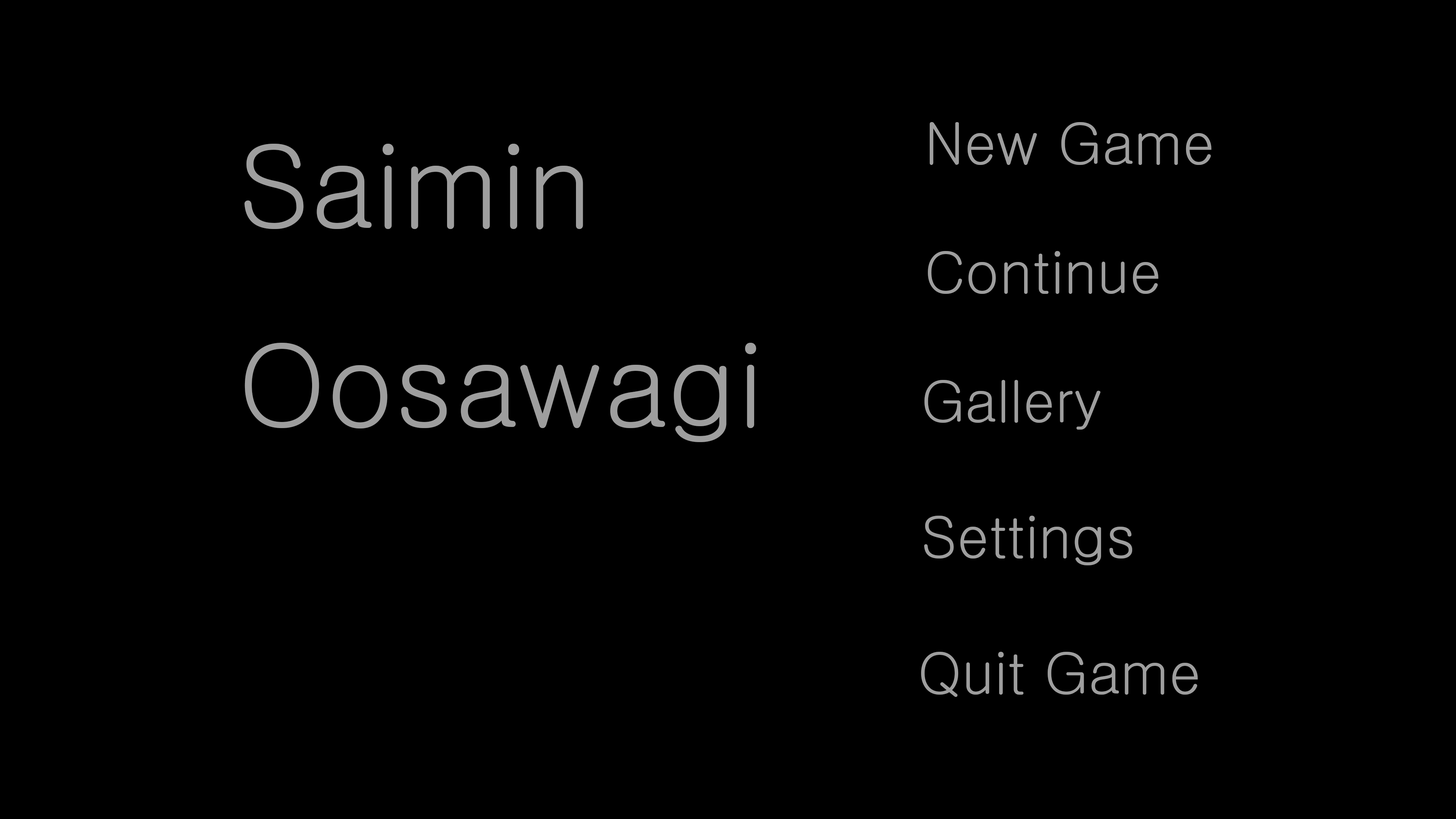
<style>
.page{position:relative;width:1456px;height:819px;background:#000000}
.page>*{position:absolute;margin:0}
.t1{font:56.9px "Gulim";color:#9e9e9e}
.t2{font:113.7px "Gulim";color:#9e9e9e}
</style>
<div class="page">
<p class="t1" style="left:930px;top:122px;width:281px;height:43px">New Game</p>
<p class="t2" style="left:244px;top:144px;width:512px;height:298px">Saimin<br>Oosawagi</p>
<p class="t1" style="left:928px;top:251px;width:230px;height:43px">Continue</p>
<p class="t1" style="left:924px;top:380px;width:177px;height:50px">Gallery</p>
<p class="t1" style="left:924px;top:516px;width:208px;height:49px">Settings</p>
<p class="t1" style="left:921px;top:652px;width:277px;height:45px">Quit Game</p>
</div>
